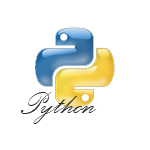
<style>
.page{position:relative;width:150px;height:150px;background:#ffffff}
.page>*{position:absolute;margin:0}
.t1{font:40px "PalaceScriptMT";color:#282828}
</style>
<div class="page">
<p class="t1" style="left:20px;top:92px;width:77px;height:32px">Python</p>
</div>
